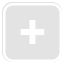
<style>
.page{position:relative;width:64px;height:64px;background:#e3e3e3}
.page>*{position:absolute;margin:0}
.t1{font:48px "CenturyGothic-Bold";color:#ffffff}
</style>
<div class="page">
<p class="t1" style="left:20px;top:20px;width:25px;height:24px">+</p>
</div>
